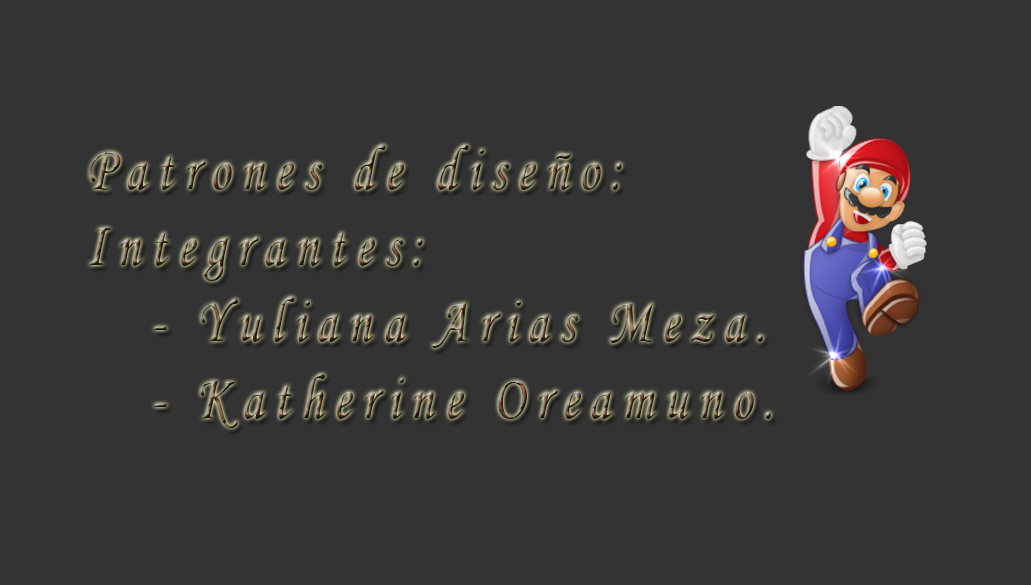
<style>
.page{position:relative;width:1031px;height:585px;background:#333333}
.page>*{position:absolute;margin:0}
.t1{font:63.5px "MonotypeCorsiva";letter-spacing:0.2em;scale:0.81 1}
</style>
<div class="page">
<p class="t1" style="left:89px;top:145px;width:682px;height:283px">Patrones de diseño:<br>Integrantes:<br> - Yuliana Arias Meza.<br> - Katherine Oreamuno.</p>
</div>
